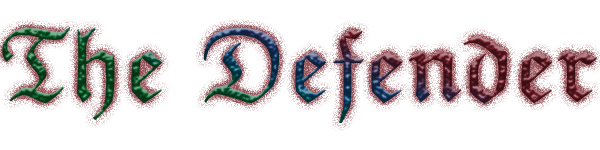
<style>
.page{position:relative;width:600px;height:150px;background:#ffffff}
.page>*{position:absolute;margin:0}
.t1{font:105px "EuclidFraktur"}
</style>
<div class="page">
<p class="t1" style="left:2px;top:26px;width:595px;height:98px">The Defender</p>
</div>
